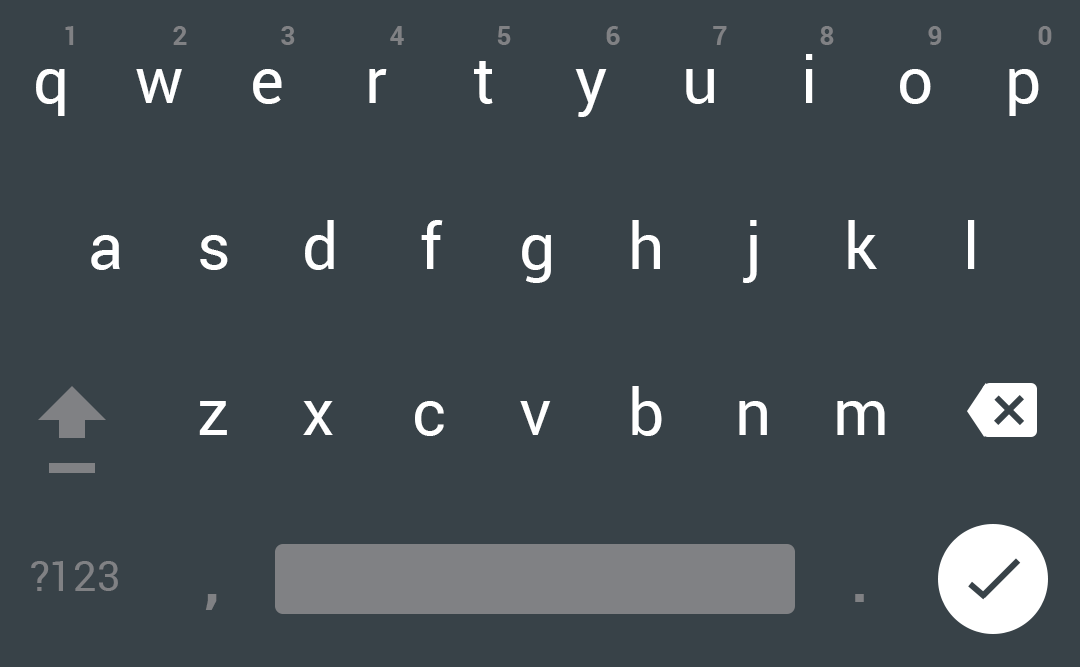
<style>
.page{position:relative;width:1080px;height:667px;background:#384248}
.page>*{position:absolute;margin:0}
.t1{font:26px "Roboto-Bold";color:#808184}
.t2{font:64px "Roboto-Regular";color:#ffffff}
.t3{font:42px "Roboto-Regular";color:#808184}
.t4{font:60px "Roboto-Bold";color:#808184}
</style>
<div class="page">
<p class="t1" style="left:65px;top:26px;width:9px;height:19px">1</p>
<p class="t1" style="left:173px;top:26px;width:14px;height:19px">2</p>
<p class="t1" style="left:281px;top:26px;width:14px;height:19px">3</p>
<p class="t1" style="left:390px;top:26px;width:14px;height:19px">4</p>
<p class="t1" style="left:497px;top:26px;width:14px;height:19px">5</p>
<p class="t1" style="left:606px;top:26px;width:14px;height:19px">6</p>
<p class="t1" style="left:713px;top:26px;width:14px;height:19px">7</p>
<p class="t1" style="left:820px;top:26px;width:14px;height:19px">8</p>
<p class="t1" style="left:928px;top:26px;width:14px;height:19px">9</p>
<p class="t1" style="left:1038px;top:26px;width:14px;height:19px">0</p>
<p class="t2" style="left:806px;top:54px;width:7px;height:49px">i</p>
<p class="t2" style="left:474px;top:61px;width:19px;height:43px">t</p>
<p class="t2" style="left:36px;top:69px;width:29px;height:47px">q</p>
<p class="t2" style="left:136px;top:69px;width:46px;height:34px">w</p>
<p class="t2" style="left:253px;top:69px;width:29px;height:35px">e</p>
<p class="t2" style="left:369px;top:69px;width:18px;height:34px">r</p>
<p class="t2" style="left:575px;top:69px;width:32px;height:48px">y</p>
<p class="t2" style="left:686px;top:69px;width:28px;height:35px">u</p>
<p class="t2" style="left:900px;top:69px;width:31px;height:35px">o</p>
<p class="t2" style="left:1009px;top:69px;width:30px;height:47px">p</p>
<p class="t2" style="left:305px;top:220px;width:29px;height:50px">d</p>
<p class="t2" style="left:421px;top:220px;width:22px;height:49px">f</p>
<p class="t2" style="left:632px;top:220px;width:28px;height:49px">h</p>
<p class="t2" style="left:742px;top:220px;width:15px;height:63px">j</p>
<p class="t2" style="left:848px;top:220px;width:29px;height:49px">k</p>
<p class="t2" style="left:968px;top:220px;width:7px;height:49px">l</p>
<p class="t2" style="left:91px;top:235px;width:29px;height:35px">a</p>
<p class="t2" style="left:200px;top:235px;width:28px;height:35px">s</p>
<p class="t2" style="left:522px;top:235px;width:29px;height:48px">g</p>
<p class="t2" style="left:632px;top:386px;width:30px;height:50px">b</p>
<p class="t2" style="left:199px;top:401px;width:28px;height:34px">z</p>
<p class="t2" style="left:303px;top:401px;width:30px;height:34px">x</p>
<p class="t2" style="left:415px;top:401px;width:29px;height:35px">c</p>
<p class="t2" style="left:520px;top:401px;width:31px;height:34px">v</p>
<p class="t2" style="left:739px;top:401px;width:28px;height:34px">n</p>
<p class="t2" style="left:837px;top:401px;width:48px;height:34px">m</p>
<p class="t3" style="left:31px;top:561px;width:87px;height:30px">?123</p>
<p class="t4" style="left:205px;top:594px;width:12px;height:16px">,</p>
<p class="t4" style="left:855px;top:594px;width:9px;height:8px">.</p>
</div>
